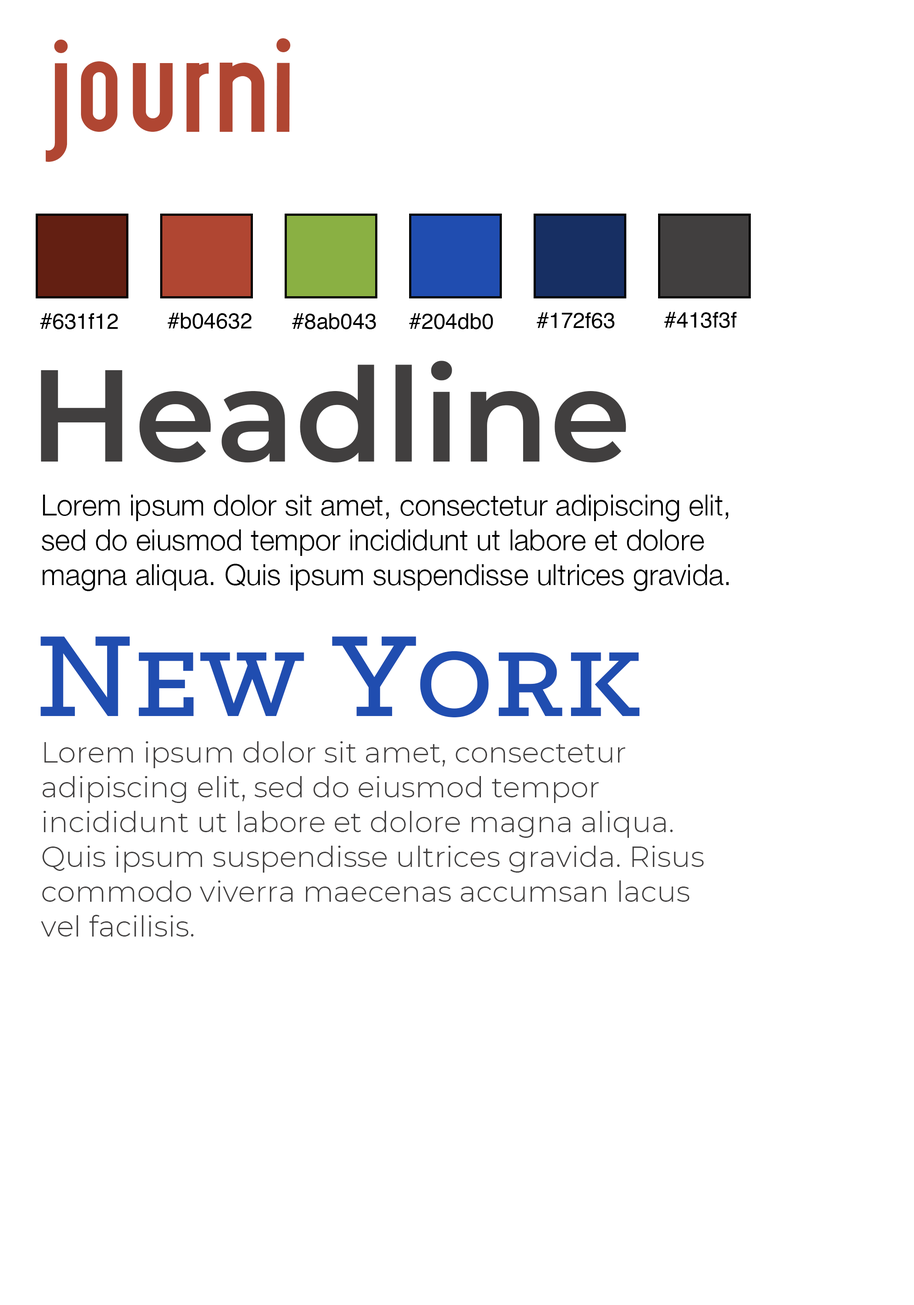
<style>
.page{position:relative;width:914px;height:1305px;background:#ffffff}
.page>*{position:absolute;margin:0}
.t1{font:130.5px "Airplane";color:#b04632}
.t2{font:21.8px "Helvetica";color:#000000}
.t3{font:130.5px "Montserrat-SemiBold";color:#413f3f}
.t4{font:130.5px "Futura-CondensedMedium";color:#b04632}
.t5{font:29px "HelveticaNeue-Light";color:#000000}
.t6{font:130.5px "KlinicSlab-Medium";color:#204db0;font-variant:small-caps}
.t7{font:29px "Montserrat-Light";color:#413f3f}
</style>
<div class="page">
<p class="t1" style="left:46px;top:38px;width:244px;height:124px">journi</p>
<p class="t2" style="left:40px;top:313px;width:78px;height:16px">#631f12</p>
<p class="t2" style="left:167px;top:313px;width:84px;height:16px">#b04632</p>
<p class="t2" style="left:292px;top:313px;width:84px;height:16px">#8ab043</p>
<p class="t2" style="left:409px;top:313px;width:84px;height:16px">#204db0</p>
<p class="t2" style="left:536px;top:312px;width:78px;height:16px">#172f63</p>
<p class="t2" style="left:664px;top:312px;width:73px;height:16px">#413f3f</p>
<p class="t3" style="left:41px;top:361px;width:585px;height:102px"><span class="t4"> </span>Headline</p>
<p class="t5" style="left:42px;top:495px;width:687px;height:96px">Lorem ipsum dolor sit amet, consectetur adipiscing elit, sed do eiusmod tempor incididunt ut labore et dolore magna aliqua. Quis ipsum suspendisse ultrices gravida. Risus commodo</p>
<p class="t6" style="left:40px;top:636px;width:600px;height:81px">New York</p>
<p class="t7" style="left:41px;top:741px;width:662px;height:196px">Lorem ipsum dolor sit amet, consectetur adipiscing elit, sed do eiusmod tempor incididunt ut labore et dolore magna aliqua. Quis ipsum suspendisse ultrices gravida. Risus commodo viverra maecenas accumsan lacus vel facilisis.</p>
</div>
